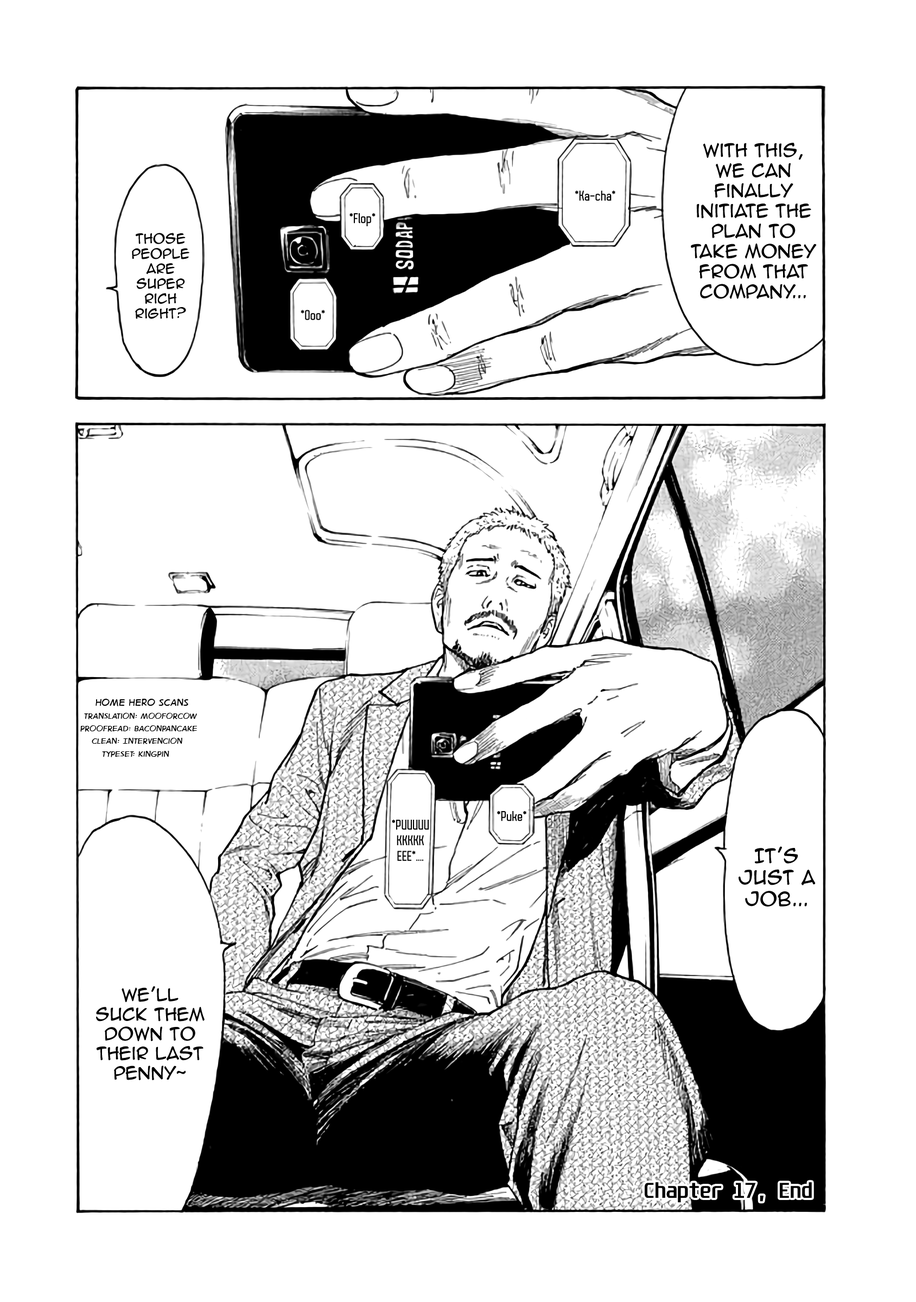
<style>
.page{position:relative;width:916px;height:1302px;background:#ffffff}
.page>*{position:absolute;margin:0}
.t1{font:16.8px "AnimeAce2.0BB";color:#000000}
.t2{font:13px "AutobusBold";color:#000000}
.t3{font:12.5px "AnimeAce2.0BB";color:#000000}
.t4{font:10.6px "DigitalStrip.BB";color:#000000}
.t5{font:12.7px "DigitalStrip.BB";color:#000000}
.t6{font:17.9px "AnimeAce2.0BB";color:#000000}
.t7{font:16.3px "AnimeAce2.0BB";color:#000000}
.t8{font:18.4px "Unispace-Bold";color:#000000}
</style>
<div class="page">
<p class="t1" style="left:691px;top:143px;width:126px;height:156px;text-align:center">With this, we can <br>finally <br>initiate the plan to take money from that company...</p>
<p class="t2" style="left:575px;top:190px;width:40px;height:11px">*Ka-cha*</p>
<p class="t2" style="left:349px;top:213px;width:26px;height:13px">*Flop*</p>
<p class="t3" style="left:132px;top:233px;width:57px;height:86px;text-align:center">Those people are  super rich right?</p>
<p class="t2" style="left:301px;top:310px;width:24px;height:10px">*Ooo*</p>
<p class="t4" style="left:80px;top:699px;width:117px;height:58px;text-align:center"><span class="t5">Home Hero Scans<br></span>Translation: MooforCow<br>Proofread: Baconpancake<br>clean: Intervencion<br>Typeset: KingPin</p>
<p class="t2" style="left:392px;top:820px;width:37px;height:41px;text-align:center">*PUUUUUKKKKK<br>EEE*....</p>
<p class="t2" style="left:497px;top:811px;width:29px;height:10px">*Puke*</p>
<p class="t6" style="left:738px;top:846px;width:77px;height:61px;text-align:center">It’s just a job...</p>
<p class="t7" style="left:96px;top:986px;width:109px;height:94px;text-align:center">we’ll suck them down to their last penny~</p>
<p class="t8" style="left:645px;top:1182px;width:167px;height:21px">Chapter 17, End</p>
</div>
